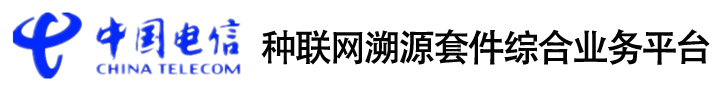
<style>
.page{position:relative;width:718px;height:90px;background:#ffffff}
.page>*{position:absolute;margin:0}
.t1{font:37.3px "AdobeHeitiStd-Regular";letter-spacing:-0.1em;color:#040404;font-weight:bold}
</style>
<div class="page">
<p class="t1" style="left:261px;top:29px;width:449px;height:36px">种联网溯源套件综合业务平台</p>
</div>
